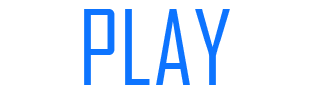
<style>
.page{position:relative;width:315px;height:94px;background:#ffffff}
.page>*{position:absolute;margin:0}
.t1{font:100px "AgencyFB-Reg";color:#0d74ff}
</style>
<div class="page">
<p class="t1" style="left:84px;top:9px;width:146px;height:76px">PLAY</p>
</div>
